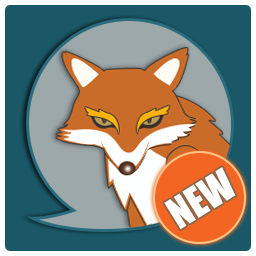
<style>
.page{position:relative;width:256px;height:256px;background:#1a5867}
.page>*{position:absolute;margin:0}
.t1{font:39.2px "Impact";color:#ffffff}
</style>
<div class="page">
<p class="t1" style="left:164px;top:167px;width:72px;height:63px;rotate:-32deg">NEW</p>
</div>
